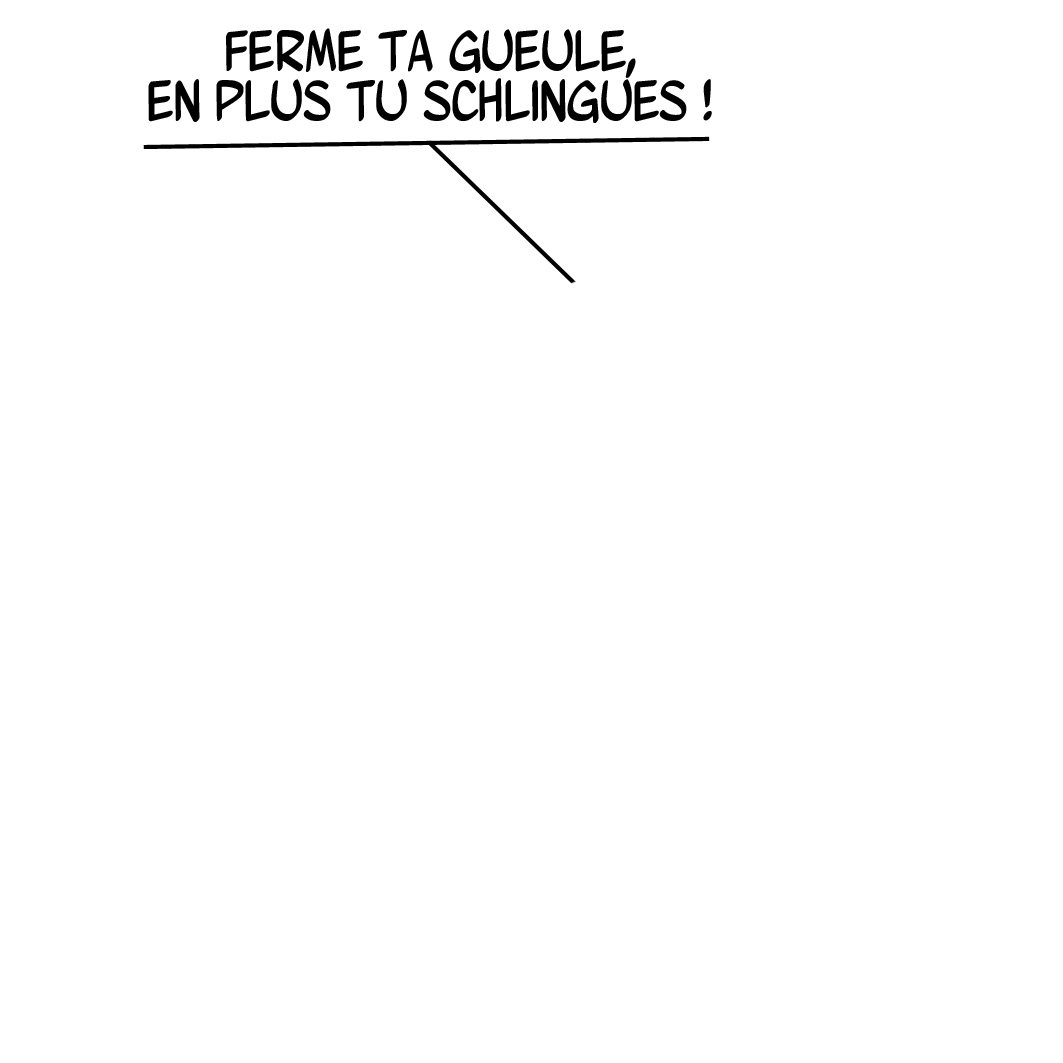
<style>
.page{position:relative;width:1063px;height:1063px;background:#ffffff}
.page>*{position:absolute;margin:0}
.t1{font:58.3px/50px "WurmicsBravo";color:#000000}
</style>
<div class="page">
<p class="t1" style="left:148px;top:28px;width:564px;height:95px;text-align:center">ferme ta gueule,<br>en plus tu schlingues !</p>
</div>
